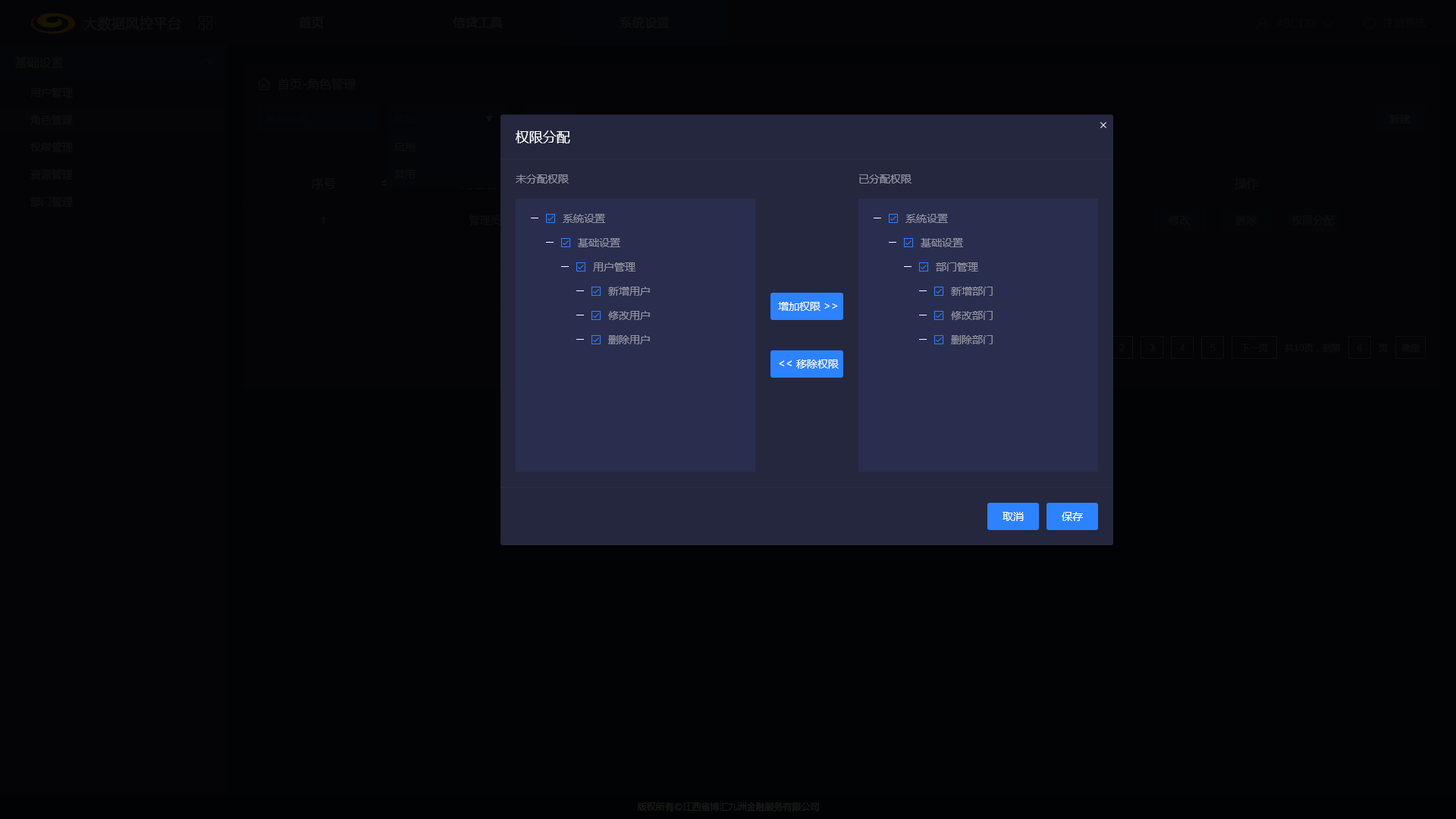
<style>
.page{position:relative;width:1456px;height:819px;background:#020304}
.page>*{position:absolute;margin:0}
.t1{font:13.6px "MicrosoftYaHei";color:#0e0e10;font-weight:bold}
.t2{font:12.1px "MicrosoftYaHei";color:#0e0e10;font-weight:bold}
.t3{font:10.6px "MicrosoftYaHei";color:#09090c}
.t4{font:12.1px "MicrosoftYaHei";color:#0e0e10}
.t5{font:10.6px "MicrosoftYaHei";color:#0e0e10}
.t6{font:13.6px "MicrosoftYaHei";color:#ffffff}
.t7{font:10.6px "MicrosoftYaHei";color:#92939f}
.t8{font:10.6px "ArialMT"}
.t9{font:10.6px "MicrosoftYaHei";color:#ffffff}
.t10{font:9.1px "ArialMT";color:#0e0e10}
.t11{font:9.1px "MicrosoftYaHei";color:#0e0e10}
.t12{font:10.9px "MicrosoftYaHei";color:#ffffff}
.t13{font:9.1px "MicrosoftYaHei";color:#191919}
</style>
<div class="page">
<p class="t1" style="left:83px;top:16px;width:98px;height:15px">大数据风控平台</p>
<p class="t2" style="left:299px;top:16px;width:25px;height:13px">首页</p>
<p class="t2" style="left:453px;top:17px;width:50px;height:12px">信贷工具</p>
<p class="t2" style="left:620px;top:16px;width:50px;height:13px">系统设置</p>
<p class="t3" style="left:1383px;top:17px;width:43px;height:11px">注销系统</p>
<p class="t3" style="left:1276px;top:19px;width:40px;height:8px">ABC123</p>
<p class="t4" style="left:14px;top:56px;width:49px;height:12px">基础设置</p>
<p class="t5" style="left:30px;top:87px;width:44px;height:12px">用户管理</p>
<p class="t4" style="left:278px;top:78px;width:78px;height:12px">首页-角色管理</p>
<p class="t5" style="left:30px;top:115px;width:44px;height:11px">角色管理</p>
<p class="t5" style="left:1389px;top:115px;width:21px;height:9px">新建</p>
<p class="t6" style="left:516px;top:130px;width:54px;height:13px">权限分配</p>
<p class="t5" style="left:30px;top:142px;width:44px;height:11px">权限管理</p>
<p class="t5" style="left:394px;top:143px;width:21px;height:9px">启用</p>
<p class="t5" style="left:30px;top:169px;width:44px;height:11px">资源管理</p>
<p class="t5" style="left:394px;top:170px;width:21px;height:9px">禁用</p>
<p class="t4" style="left:311px;top:177px;width:25px;height:13px">序号</p>
<p class="t7" style="left:516px;top:174px;width:53px;height:10px">未分配权限</p>
<p class="t7" style="left:859px;top:174px;width:53px;height:10px">已分配权限</p>
<p class="t4" style="left:1235px;top:177px;width:24px;height:13px">操作</p>
<p class="t5" style="left:30px;top:196px;width:44px;height:12px">部门管理</p>
<p class="t8" style="left:322px;top:216px;width:3px;height:8px">1</p>
<p class="t5" style="left:469px;top:215px;width:31px;height:11px">管理员</p>
<p class="t7" style="left:563px;top:214px;width:42px;height:9px">系统设置</p>
<p class="t7" style="left:905px;top:214px;width:43px;height:9px">系统设置</p>
<p class="t5" style="left:1169px;top:215px;width:22px;height:11px">修改</p>
<p class="t5" style="left:1235px;top:215px;width:22px;height:11px">删除</p>
<p class="t5" style="left:1291px;top:215px;width:44px;height:11px">权限分配</p>
<p class="t7" style="left:578px;top:238px;width:42px;height:9px">基础设置</p>
<p class="t7" style="left:921px;top:238px;width:42px;height:9px">基础设置</p>
<p class="t7" style="left:593px;top:262px;width:42px;height:9px">用户管理</p>
<p class="t7" style="left:936px;top:262px;width:42px;height:9px">部门管理</p>
<p class="t7" style="left:608px;top:287px;width:42px;height:9px">新增用户</p>
<p class="t7" style="left:951px;top:287px;width:42px;height:9px">新增部门</p>
<p class="t9" style="left:778px;top:302px;width:43px;height:9px">增加权限</p>
<p class="t9" style="left:824px;top:303px;width:14px;height:6px">&gt;&gt;</p>
<p class="t7" style="left:608px;top:311px;width:42px;height:9px">修改用户</p>
<p class="t7" style="left:951px;top:311px;width:42px;height:9px">修改部门</p>
<p class="t7" style="left:608px;top:335px;width:42px;height:9px">删除用户</p>
<p class="t7" style="left:951px;top:335px;width:42px;height:9px">删除部门</p>
<p class="t10" style="left:1119px;top:344px;width:6px;height:7px">2</p>
<p class="t10" style="left:1150px;top:344px;width:5px;height:7px">3</p>
<p class="t10" style="left:1180px;top:344px;width:5px;height:7px">4</p>
<p class="t10" style="left:1210px;top:344px;width:6px;height:7px">5</p>
<p class="t11" style="left:1241px;top:344px;width:27px;height:9px">下一页</p>
<p class="t11" style="left:1285px;top:343px;width:56px;height:10px">共10页，到第</p>
<p class="t10" style="left:1357px;top:344px;width:6px;height:7px">6</p>
<p class="t11" style="left:1379px;top:344px;width:9px;height:9px">页</p>
<p class="t11" style="left:1401px;top:343px;width:19px;height:10px">确定</p>
<p class="t12" style="left:779px;top:360px;width:13px;height:6px;rotate:180deg">&gt;&gt;</p>
<p class="t9" style="left:796px;top:359px;width:43px;height:10px">移除权限</p>
<p class="t9" style="left:1003px;top:512px;width:21px;height:9px">取消</p>
<p class="t9" style="left:1062px;top:512px;width:21px;height:9px">保存</p>
<p class="t13" style="left:637px;top:802px;width:182px;height:9px">版权所有©江西省博汇九洲金融服务有限公司</p>
</div>
